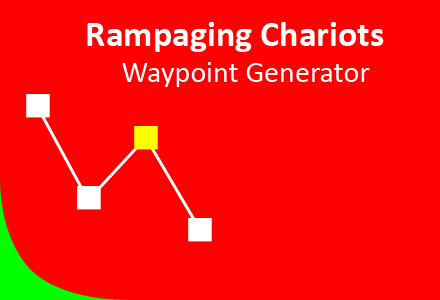
<style>
.page{position:relative;width:440px;height:300px;background:#ff0000}
.page>*{position:absolute;margin:0}
.t1{font:36px "Calibri-Bold";color:#ffffff}
.t2{font:30px "Calibri";color:#ffffff}
</style>
<div class="page">
<p class="t1" style="left:87px;top:22px;width:297px;height:65px">Rampaging Chariots<br><span class="t2"> Waypoint Generator</span></p>
</div>
